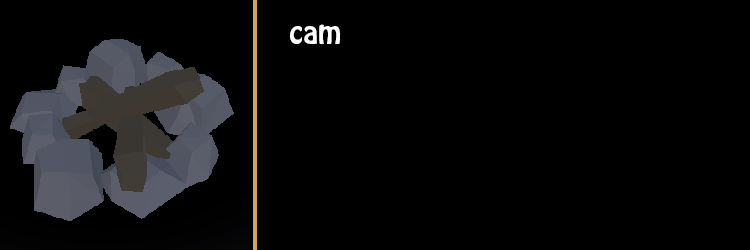
<style>
.page{position:relative;width:750px;height:250px;background:#000000}
.page>*{position:absolute;margin:0}
.t1{font:28px "HoboStd";color:#ffffff}
</style>
<div class="page">
<p class="t1" style="left:290px;top:24px;width:50px;height:20px">cam</p>
</div>
